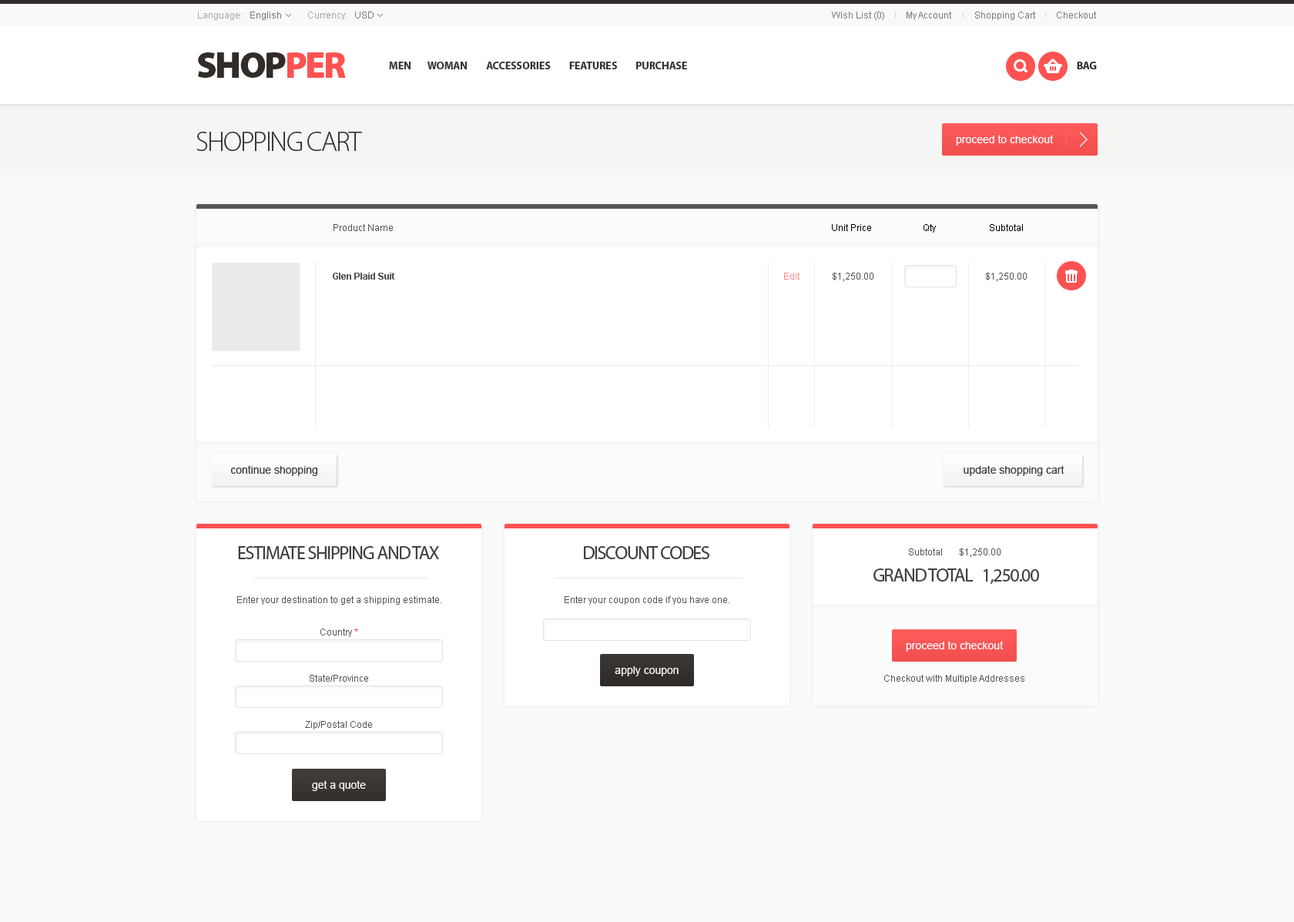
<style>
.page{position:relative;width:1294px;height:922px;background:#fafafa}
.page>*{position:absolute;margin:0}
.t1{font:27.7px "MyriadPro-Light";letter-spacing:-0.05em;color:#322c29;text-transform:uppercase}
.t2{font:10.8px "ArialMT";color:#ffffff}
.t3{font:9.2px "ArialMT";color:#535353}
.t4{font:9.2px "ArialMT";color:#000000}
.t5{font:9.2px "Arial-BoldMT";color:#545454}
.t6{font:9.2px "ArialMT";color:#545454}
.t7{font:10.8px "ArialMT";color:#3e3e3e}
.t8{font:18.5px "MyriadPro-Regular";letter-spacing:-0.05em;color:#404040;text-transform:uppercase}
.t9{font:9.2px/15.4px "ArialMT";color:#545454}
</style>
<div class="page">
<p class="t1" style="left:196px;top:132px;width:166px;height:19px">shopping cart</p>
<p class="t2" style="left:956px;top:135px;width:97px;height:11px">proceed to checkout</p>
<p class="t3" style="left:333px;top:224px;width:60px;height:7px">Product Name</p>
<p class="t4" style="left:832px;top:224px;width:191px;height:9px">Unit Price                      Qty                       Subtotal</p>
<p class="t5" style="left:333px;top:273px;width:61px;height:7px">Glen Plaid Suit</p>
<p class="t6" style="left:784px;top:273px;width:242px;height:8px">Edit          $1,250.00                                                $1,250.00</p>
<p class="t7" style="left:230px;top:465px;width:87px;height:11px">continue shopping</p>
<p class="t7" style="left:963px;top:465px;width:101px;height:11px">update shopping cart</p>
<p class="t8" style="left:238px;top:546px;width:201px;height:13px">Estimate Shipping and Tax</p>
<p class="t8" style="left:584px;top:546px;width:125px;height:13px">Discount Codes</p>
<p class="t6" style="left:909px;top:548px;width:91px;height:9px">Subtotal       $1,250.00</p>
<p class="t8" style="left:873px;top:568px;width:166px;height:16px">Grand Total   1,250.00</p>
<p class="t6" style="left:237px;top:596px;width:204px;height:8px">Enter your destination to get a shipping estimate.</p>
<p class="t6" style="left:564px;top:596px;width:165px;height:8px">Enter your coupon code if you have one.</p>
<p class="t9" style="left:305px;top:628px;width:67px;height:101px;text-align:center">Country *<br><br><br>State/Province<br><br><br>Zip/Postal Code</p>
<p class="t2" style="left:906px;top:641px;width:97px;height:10px">proceed to checkout</p>
<p class="t2" style="left:614px;top:666px;width:64px;height:10px">apply coupon</p>
<p class="t3" style="left:884px;top:675px;width:140px;height:8px">Checkout with Multiple Addresses</p>
<p class="t2" style="left:312px;top:780px;width:54px;height:11px">get a quote</p>
</div>
